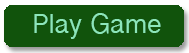
<style>
.page{position:relative;width:189px;height:53px;background:#11530c}
.page>*{position:absolute;margin:0}
.t1{font:24px "BanglaSangamMN";color:#8ce6ba}
</style>
<div class="page">
<p class="t1" style="left:34px;top:13px;width:127px;height:26px">Play Game</p>
</div>
